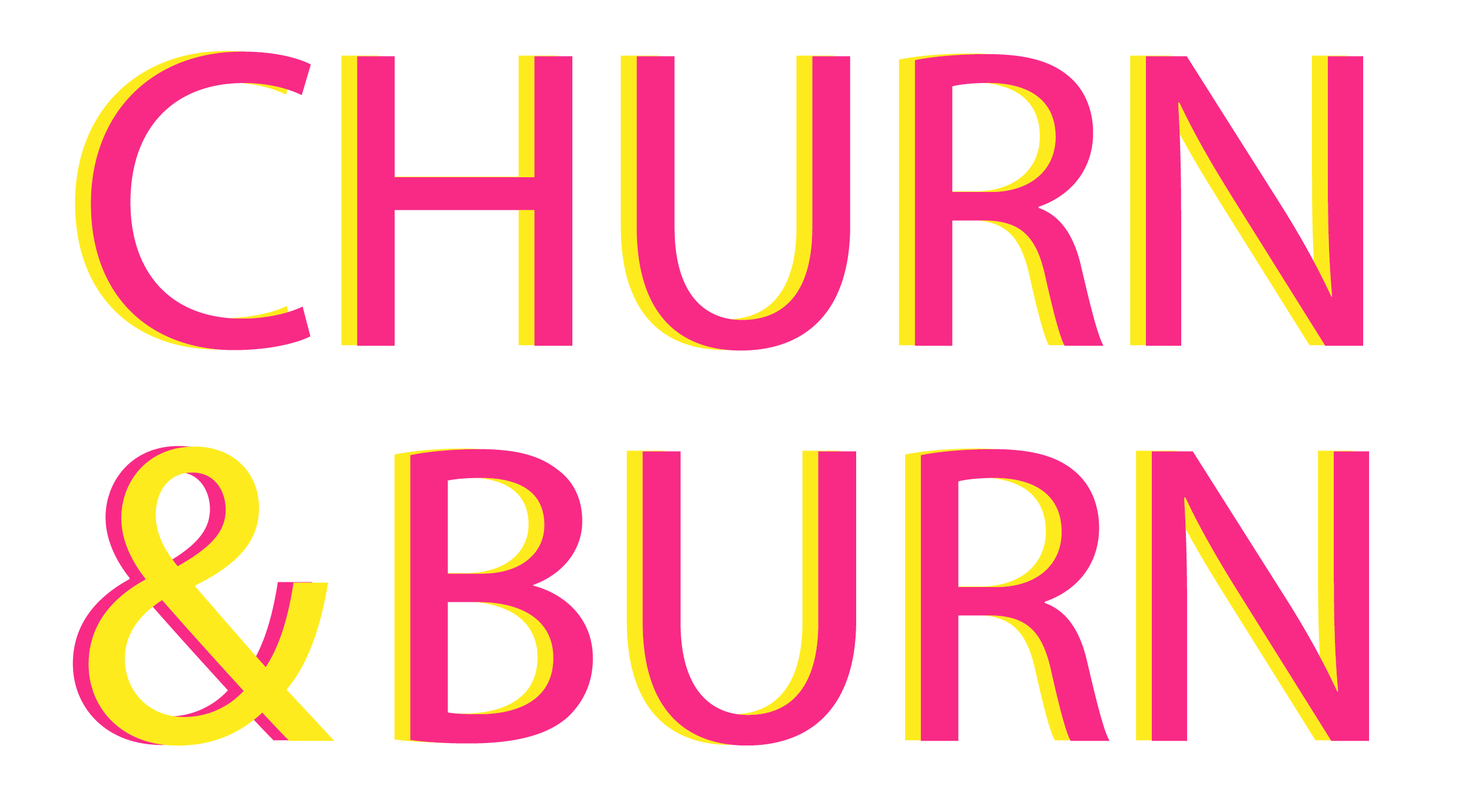
<style>
.page{position:relative;width:1468px;height:812px;background:#ffffff}
.page>*{position:absolute;margin:0}
.t1{font:429.4px/395.1px "MyriadPro-Regular";color:#feeb1d}
.t2{font:429.4px/395.1px "MyriadPro-Regular";color:#f82a86}
</style>
<div class="page">
<p class="t1" style="left:72px;top:51px;width:1282px;height:695px">CHURN <br><span class="t2">&amp; </span>BURN</p>
<p class="t2" style="left:88px;top:51px;width:1281px;height:695px">CHURN <br><span class="t1">&amp; </span>BURN</p>
</div>
